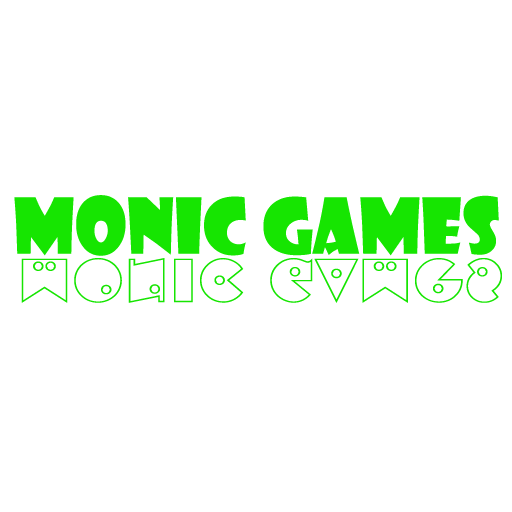
<style>
.page{position:relative;width:512px;height:512px;background:#ffffff}
.page>*{position:absolute;margin:0}
.t1{font:75.1px "ShowcardGothic-Reg";color:#16e501}
.t2{font:61.2px "ShotgunBlanksBT-Regular";color:#16e501;scale:1.08 1}
</style>
<div class="page">
<p class="t1" style="left:14px;top:195px;width:485px;height:61px">Monıc Games</p>
<p class="t2" style="left:21px;top:258px;width:481px;height:45px">Monıc Games</p>
</div>
